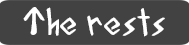
<style>
.page{position:relative;width:189px;height:45px;background:#424242}
.page>*{position:absolute;margin:0}
.t1{font:34.9px "AcadianRunes-Regular";color:#ffffff}
</style>
<div class="page">
<p class="t1" style="left:23px;top:7px;width:142px;height:30px">The rests</p>
</div>
